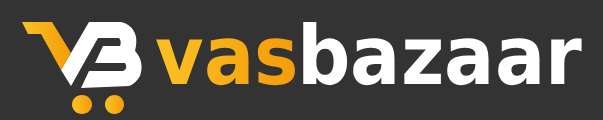
<style>
.page{position:relative;width:603px;height:120px;background:#333333}
.page>*{position:absolute;margin:0}
.t1{font:81.6px "DejaVuSans-Bold";color:#ffffff;scale:0.91 1}
.t2{font:81.6px "DejaVuSans-Bold";color:#f7ac16;scale:0.91 1}
</style>
<div class="page">
<p class="t1" style="left:303px;top:22px;width:279px;height:64px">bazaar</p>
<p class="t2" style="left:156px;top:38px;width:139px;height:48px">vas</p>
</div>
